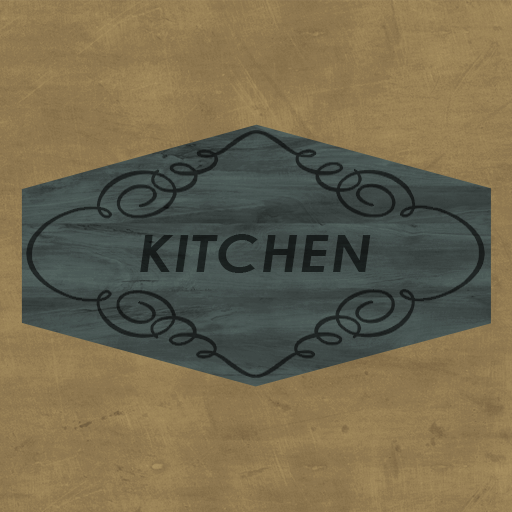
<style>
.page{position:relative;width:512px;height:512px}
.page>*{position:absolute;margin:0}
.t1{font:52px "CenturyGothic-BoldItalic";letter-spacing:0.025em;color:#191f1d;text-transform:uppercase;scale:1.07 1}
</style>
<div class="page">
<p class="t1" style="left:140px;top:234px;width:231px;height:39px">Kitchen</p>
</div>
